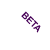
<style>
.page{position:relative;width:50px;height:50px;background:#ffffff}
.page>*{position:absolute;margin:0}
.t1{font:9.1px "Arial-BoldMT";color:#460157}
</style>
<div class="page">
<p class="t1" style="left:21px;top:11px;width:20px;height:22px;rotate:45deg">BETA</p>
</div>
